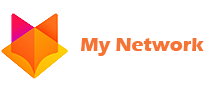
<style>
.page{position:relative;width:214px;height:90px;background:#ffffff}
.page>*{position:absolute;margin:0}
.t1{font:19.8px "ErasITC-Bold";color:#f57435}
</style>
<div class="page">
<p class="t1" style="left:81px;top:38px;width:123px;height:18px">My Network</p>
</div>
